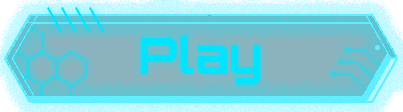
<style>
.page{position:relative;width:403px;height:112px}
.page>*{position:absolute;margin:0}
.t1{font:50px "Orbitron-ExtraBold";color:#00e4ff}
</style>
<div class="page">
<p class="t1" style="left:140px;top:35px;width:121px;height:50px">Play</p>
</div>
